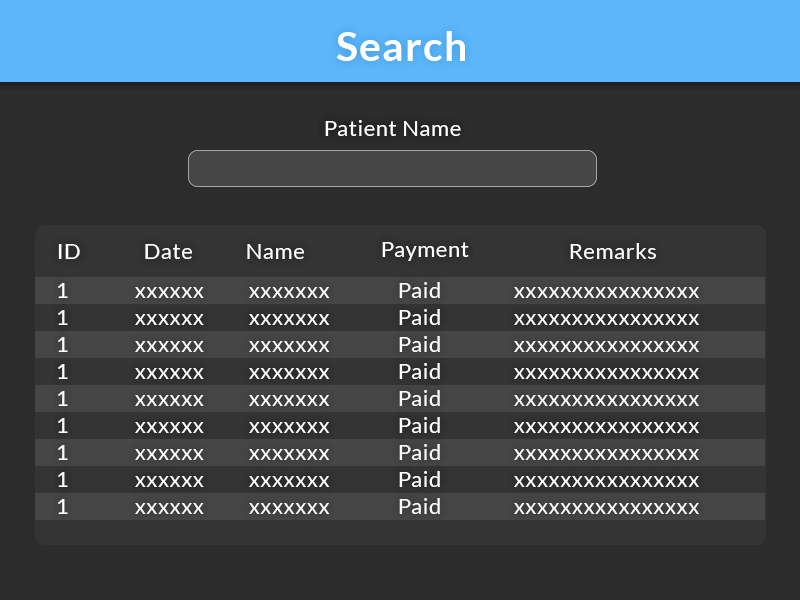
<style>
.page{position:relative;width:800px;height:600px;background:#2c2c2c}
.page>*{position:absolute;margin:0}
.t1{font:41.5px "Lato-Bold";letter-spacing:0.025em;color:#ffffff}
.t2{font:22px "Lato-Regular";letter-spacing:0.025em;color:#ffffff}
</style>
<div class="page">
<p class="t1" style="left:336px;top:31px;width:129px;height:30px">Search</p>
<p class="t2" style="left:325px;top:120px;width:136px;height:16px">Patient Name</p>
<p class="t2" style="left:58px;top:244px;width:22px;height:15px">ID</p>
<p class="t2" style="left:145px;top:244px;width:47px;height:15px">Date</p>
<p class="t2" style="left:247px;top:244px;width:57px;height:15px">Name</p>
<p class="t2" style="left:382px;top:242px;width:87px;height:19px">Payment</p>
<p class="t2" style="left:570px;top:243px;width:86px;height:16px">Remarks</p>
<p class="t2" style="left:58px;top:283px;width:10px;height:15px">1</p>
<p class="t2" style="left:135px;top:287px;width:69px;height:11px">xxxxxx</p>
<p class="t2" style="left:249px;top:287px;width:81px;height:11px">xxxxxxx</p>
<p class="t2" style="left:399px;top:282px;width:41px;height:16px">Paid</p>
<p class="t2" style="left:514px;top:287px;width:185px;height:11px">xxxxxxxxxxxxxxxx</p>
<p class="t2" style="left:58px;top:310px;width:10px;height:15px">1</p>
<p class="t2" style="left:135px;top:314px;width:69px;height:11px">xxxxxx</p>
<p class="t2" style="left:249px;top:314px;width:81px;height:11px">xxxxxxx</p>
<p class="t2" style="left:399px;top:309px;width:41px;height:16px">Paid</p>
<p class="t2" style="left:514px;top:314px;width:185px;height:11px">xxxxxxxxxxxxxxxx</p>
<p class="t2" style="left:58px;top:337px;width:10px;height:15px">1</p>
<p class="t2" style="left:135px;top:341px;width:69px;height:11px">xxxxxx</p>
<p class="t2" style="left:249px;top:341px;width:81px;height:11px">xxxxxxx</p>
<p class="t2" style="left:399px;top:336px;width:41px;height:16px">Paid</p>
<p class="t2" style="left:514px;top:341px;width:185px;height:11px">xxxxxxxxxxxxxxxx</p>
<p class="t2" style="left:58px;top:364px;width:10px;height:15px">1</p>
<p class="t2" style="left:399px;top:363px;width:41px;height:16px">Paid</p>
<p class="t2" style="left:135px;top:368px;width:69px;height:11px">xxxxxx</p>
<p class="t2" style="left:249px;top:368px;width:81px;height:11px">xxxxxxx</p>
<p class="t2" style="left:514px;top:368px;width:185px;height:11px">xxxxxxxxxxxxxxxx</p>
<p class="t2" style="left:399px;top:390px;width:41px;height:16px">Paid</p>
<p class="t2" style="left:58px;top:391px;width:10px;height:15px">1</p>
<p class="t2" style="left:135px;top:395px;width:69px;height:11px">xxxxxx</p>
<p class="t2" style="left:249px;top:395px;width:81px;height:11px">xxxxxxx</p>
<p class="t2" style="left:514px;top:395px;width:185px;height:11px">xxxxxxxxxxxxxxxx</p>
<p class="t2" style="left:58px;top:418px;width:10px;height:15px">1</p>
<p class="t2" style="left:135px;top:422px;width:69px;height:11px">xxxxxx</p>
<p class="t2" style="left:249px;top:422px;width:81px;height:11px">xxxxxxx</p>
<p class="t2" style="left:399px;top:417px;width:41px;height:16px">Paid</p>
<p class="t2" style="left:514px;top:422px;width:185px;height:11px">xxxxxxxxxxxxxxxx</p>
<p class="t2" style="left:58px;top:445px;width:10px;height:15px">1</p>
<p class="t2" style="left:135px;top:449px;width:69px;height:11px">xxxxxx</p>
<p class="t2" style="left:249px;top:449px;width:81px;height:11px">xxxxxxx</p>
<p class="t2" style="left:399px;top:444px;width:41px;height:16px">Paid</p>
<p class="t2" style="left:514px;top:449px;width:185px;height:11px">xxxxxxxxxxxxxxxx</p>
<p class="t2" style="left:58px;top:472px;width:10px;height:15px">1</p>
<p class="t2" style="left:399px;top:471px;width:41px;height:16px">Paid</p>
<p class="t2" style="left:135px;top:476px;width:69px;height:11px">xxxxxx</p>
<p class="t2" style="left:249px;top:476px;width:81px;height:11px">xxxxxxx</p>
<p class="t2" style="left:514px;top:476px;width:185px;height:11px">xxxxxxxxxxxxxxxx</p>
<p class="t2" style="left:58px;top:499px;width:10px;height:15px">1</p>
<p class="t2" style="left:135px;top:503px;width:69px;height:11px">xxxxxx</p>
<p class="t2" style="left:249px;top:503px;width:81px;height:11px">xxxxxxx</p>
<p class="t2" style="left:399px;top:498px;width:41px;height:16px">Paid</p>
<p class="t2" style="left:514px;top:503px;width:185px;height:11px">xxxxxxxxxxxxxxxx</p>
</div>
